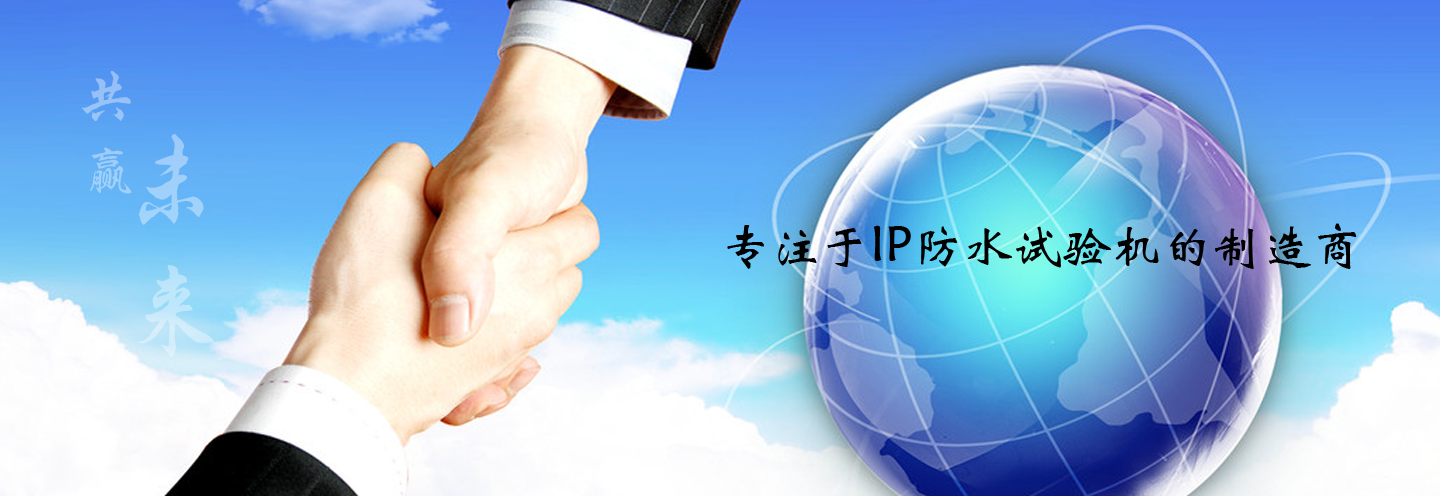
<style>
.page{position:relative;width:1440px;height:496px}
.page>*{position:absolute;margin:0}
.t1{font:56px "FZXKJW--GB1-0";color:#99c4f8}
.t2{font:100px "FZXKJW--GB1-0"}
.t3{font:50px "STXinwei";color:#000000}
</style>
<div class="page">
<p class="t1" style="left:81px;top:71px;width:51px;height:123px">共 赢</p>
<p class="t2" style="left:137px;top:134px;width:78px;height:223px">未 来</p>
<p class="t3" style="left:727px;top:223px;width:630px;height:46px">专注于IP防水试验机的制造商</p>
</div>
